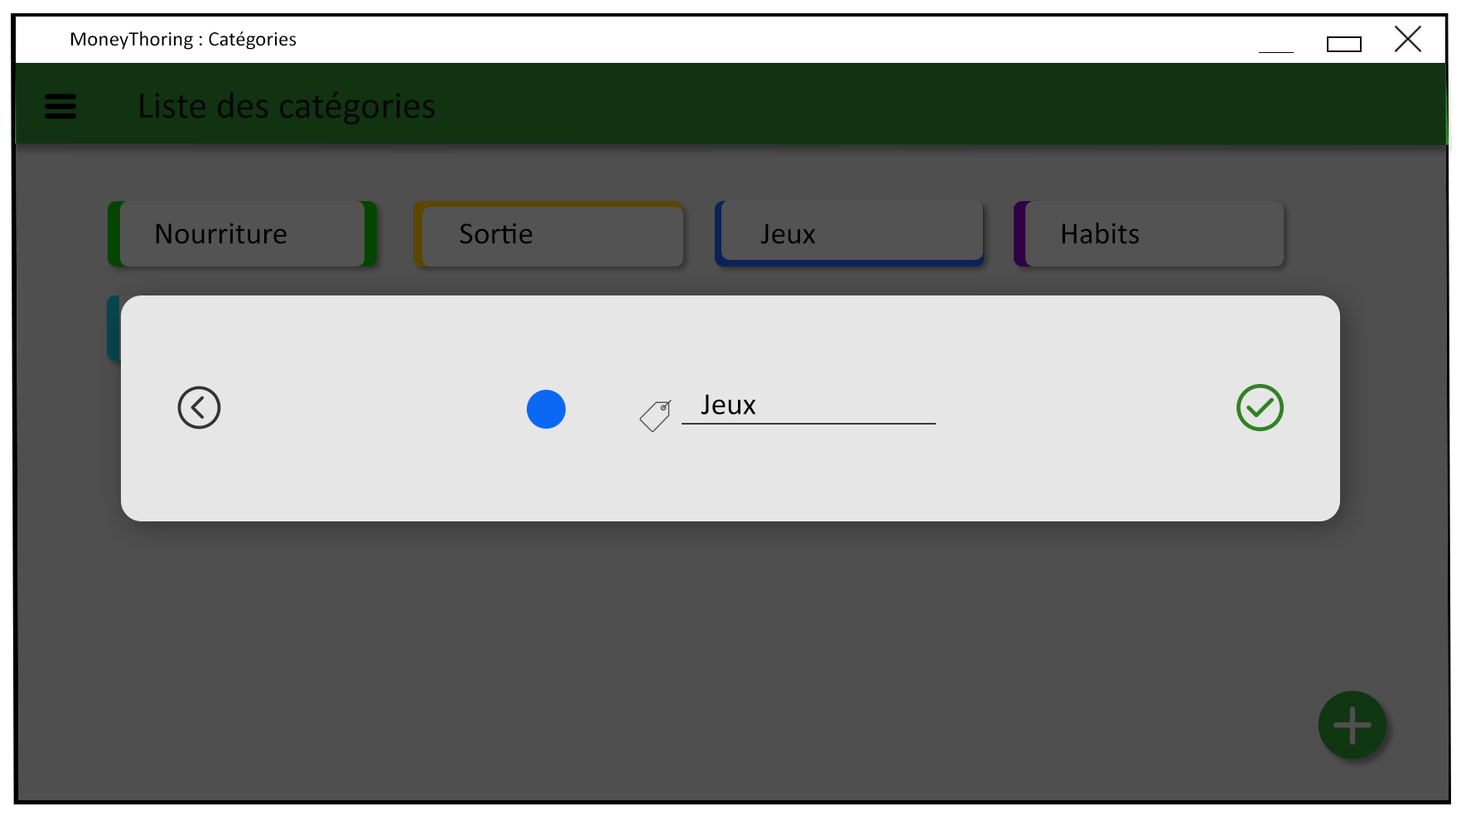
<style>
.page{position:relative;width:1461px;height:816px;background:#4f4f4f}
.page>*{position:absolute;margin:0}
.t1{font:20.7px "Calibri";color:#010101}
.t2{font:37.9px "Calibri";color:#161616}
.t3{font:31px "Calibri";color:#000000}
</style>
<div class="page">
<p class="t1" style="left:71px;top:31px;width:225px;height:19px">MoneyThoring : Catégories</p>
<p class="t2" style="left:140px;top:91px;width:295px;height:34px">Liste des catégories</p>
<p class="t3" style="left:1061px;top:222px;width:77px;height:22px">Habits</p>
<p class="t3" style="left:156px;top:223px;width:130px;height:21px">Nourriture</p>
<p class="t3" style="left:460px;top:223px;width:72px;height:21px">Sortie</p>
<p class="t3" style="left:760px;top:224px;width:56px;height:20px">Jeux</p>
<p class="t3" style="left:700px;top:394px;width:56px;height:21px">Jeux</p>
</div>
